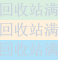
<style>
.page{position:relative;width:58px;height:60px;background:#fef0db}
.page>*{position:absolute;margin:0}
.t1{font:15px "SimSun";color:#c8d1dd}
</style>
<div class="page">
<p class="t1" style="left:0px;top:2px;width:58px;height:15px">回收站满</p>
<p class="t1" style="left:0px;top:22px;width:58px;height:15px">回收站满</p>
<p class="t1" style="left:0px;top:42px;width:58px;height:15px">回收站满</p>
</div>
